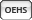
<style>
.page{position:relative;width:32px;height:20px;background:#ffffff}
.page>*{position:absolute;margin:0}
.t1{font:10px "Calibri";color:#333333}
</style>
<div class="page">
<p class="t1" style="left:5px;top:7px;width:22px;height:6px">OEHS</p>
</div>
